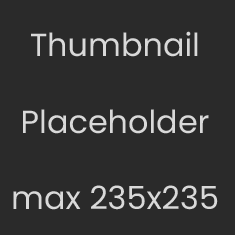
<style>
.page{position:relative;width:235px;height:235px;background:#2a2a2a}
.page>*{position:absolute;margin:0}
.t1{font:31.9px "Poppins-Regular";color:#d9d9d9}
</style>
<div class="page">
<p class="t1" style="left:13px;top:31px;width:205px;height:179px;text-align:center">Thumbnail<br><br>Placeholder<br><br>max 235x235</p>
</div>
